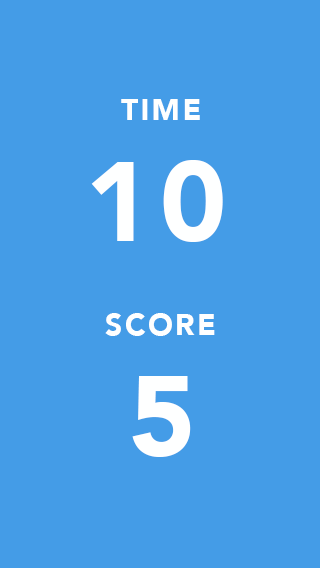
<style>
.page{position:relative;width:320px;height:568px;background:#449ce7}
.page>*{position:absolute;margin:0}
.t1{font:30.2px "Avenir-Black";letter-spacing:0.075em;color:#feffff}
.t2{font:112.4px "Avenir-Black";letter-spacing:0.075em;color:#feffff}
.t3{font:112.5px "Avenir-Black";letter-spacing:0.075em;color:#feffff}
</style>
<div class="page">
<p class="t1" style="left:121px;top:99px;width:79px;height:21px">TIME</p>
<p class="t2" style="left:91px;top:160px;width:132px;height:82px">10</p>
<p class="t1" style="left:105px;top:313px;width:110px;height:23px">SCORE</p>
<p class="t3" style="left:132px;top:376px;width:59px;height:81px">5</p>
</div>
